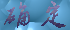
<style>
.page{position:relative;width:70px;height:30px}
.page>*{position:absolute;margin:0}
.t1{font:26.7px "2.0-";letter-spacing:0.001em}
</style>
<div class="page">
<p class="t1" style="left:4px;top:1px;width:62px;height:27px">确 定</p>
</div>
